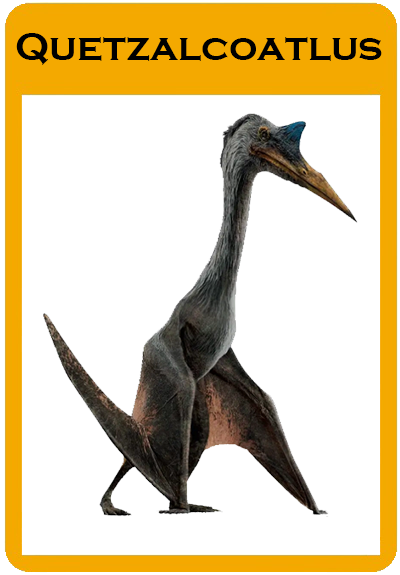
<style>
.page{position:relative;width:400px;height:575px;background:#ffffff}
.page>*{position:absolute;margin:0}
.t1{font:40px "CopperplateGothic-Bold";color:#000000}
</style>
<div class="page">
<p class="t1" style="left:16px;top:33px;width:366px;height:32px">Quetzalcoatlus</p>
</div>
